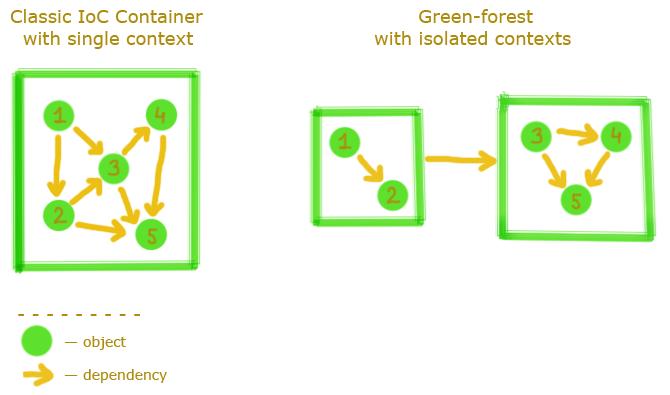
<style>
.page{position:relative;width:670px;height:395px;background:#ffffff}
.page>*{position:absolute;margin:0}
.t1{font:18px "Verdana";color:#ac8b0d}
.t2{font:14px "Verdana";color:#ac8b0d}
</style>
<div class="page">
<p class="t1" style="left:10px;top:9px;width:193px;height:40px">Classic IoC Container <br>  with single context</p>
<p class="t1" style="left:374px;top:9px;width:197px;height:36px">Green-forest <br>with isolated contexts</p>
<p class="t1" style="left:18px;top:314px;width:122px;height:2px">- - - - - - - - -</p>
<p class="t2" style="left:64px;top:336px;width:62px;height:14px">— object</p>
<p class="t2" style="left:64px;top:369px;width:103px;height:14px">— dependency</p>
</div>
